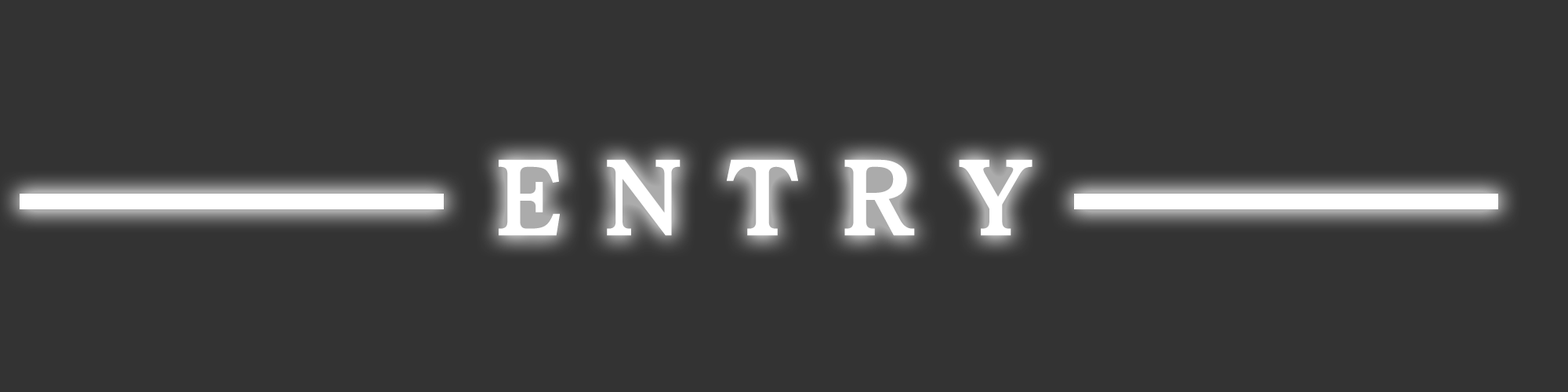
<style>
.page{position:relative;width:1568px;height:392px;background:#333333}
.page>*{position:absolute;margin:0}
.t1{font:112.9px "DFGanShinKei-W7-WINP-RKSJ-H";letter-spacing:0.35em;color:#ffffff}
</style>
<div class="page">
<p class="t1" style="left:499px;top:159px;width:534px;height:77px">ENTRY</p>
</div>
